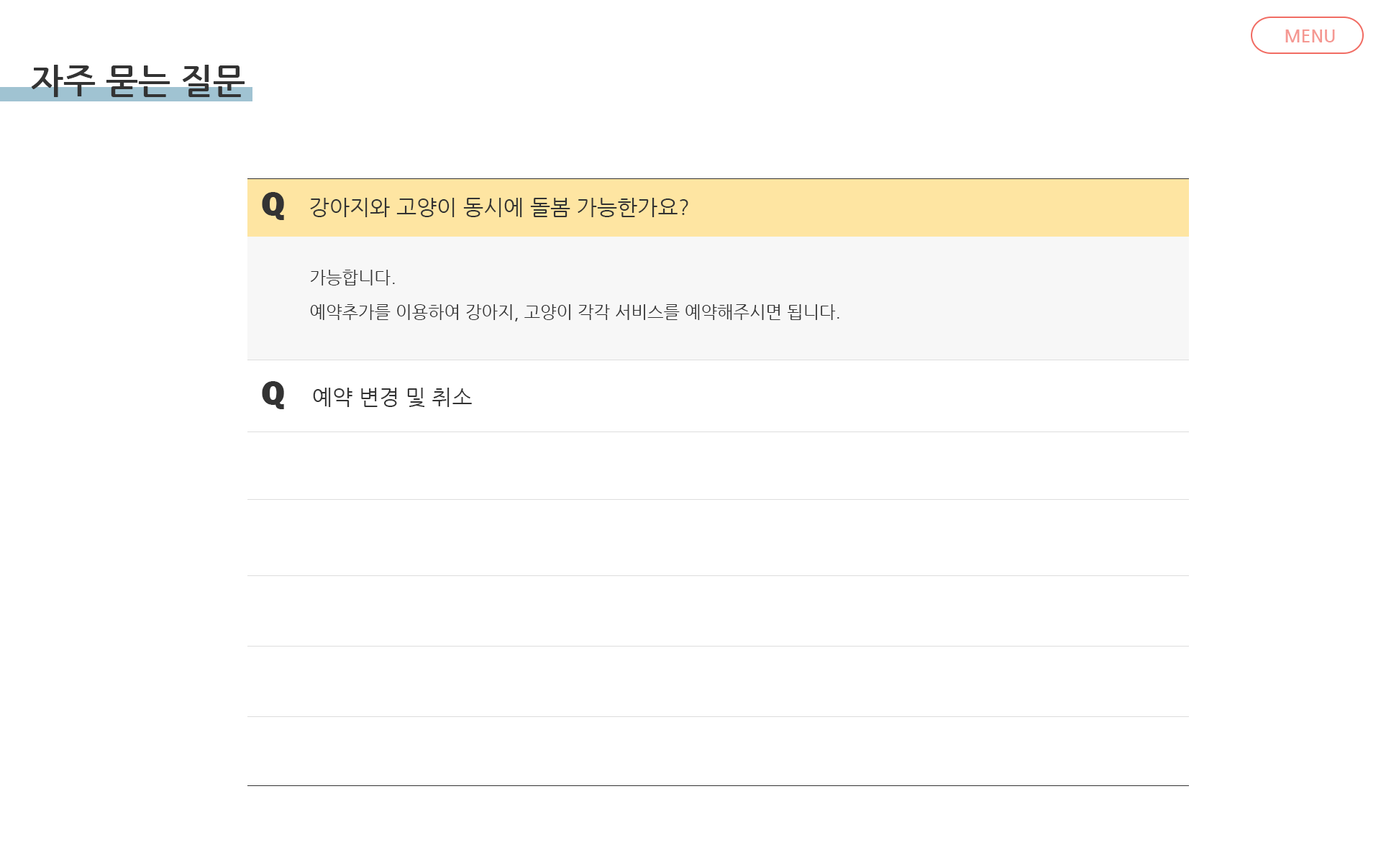
<style>
.page{position:relative;width:1381px;height:863px;background:#ffffff}
.page>*{position:absolute;margin:0}
.t1{font:17.3px "NanumGothicBold";color:#f59892}
.t2{font:34.5px "NanumGothicBold";color:#333333}
.t3{font:34.5px "FranklinGothic-Heavy";color:#333333}
.t4{font:21.6px "NanumGothic";color:#333333}
.t5{font:17.3px/34.5px "NanumGothic";color:#333333}
</style>
<div class="page">
<p class="t1" style="left:1286px;top:29px;width:49px;height:13px">MENU</p>
<p class="t2" style="left:31px;top:65px;width:214px;height:32px">자주 묻는 질문</p>
<p class="t3" style="left:262px;top:192px;width:22px;height:28px">Q</p>
<p class="t4" style="left:310px;top:198px;width:378px;height:19px">강아지와 고양이 동시에 돌봄 가능한가요?</p>
<p class="t5" style="left:310px;top:270px;width:530px;height:52px">가능합니다.<br>예약추가를 이용하여 강아지, 고양이 각각 서비스를 예약해주시면 됩니다.</p>
<p class="t3" style="left:262px;top:381px;width:22px;height:28px">Q</p>
<p class="t4" style="left:313px;top:388px;width:159px;height:19px">예약 변경 및 취소</p>
</div>
